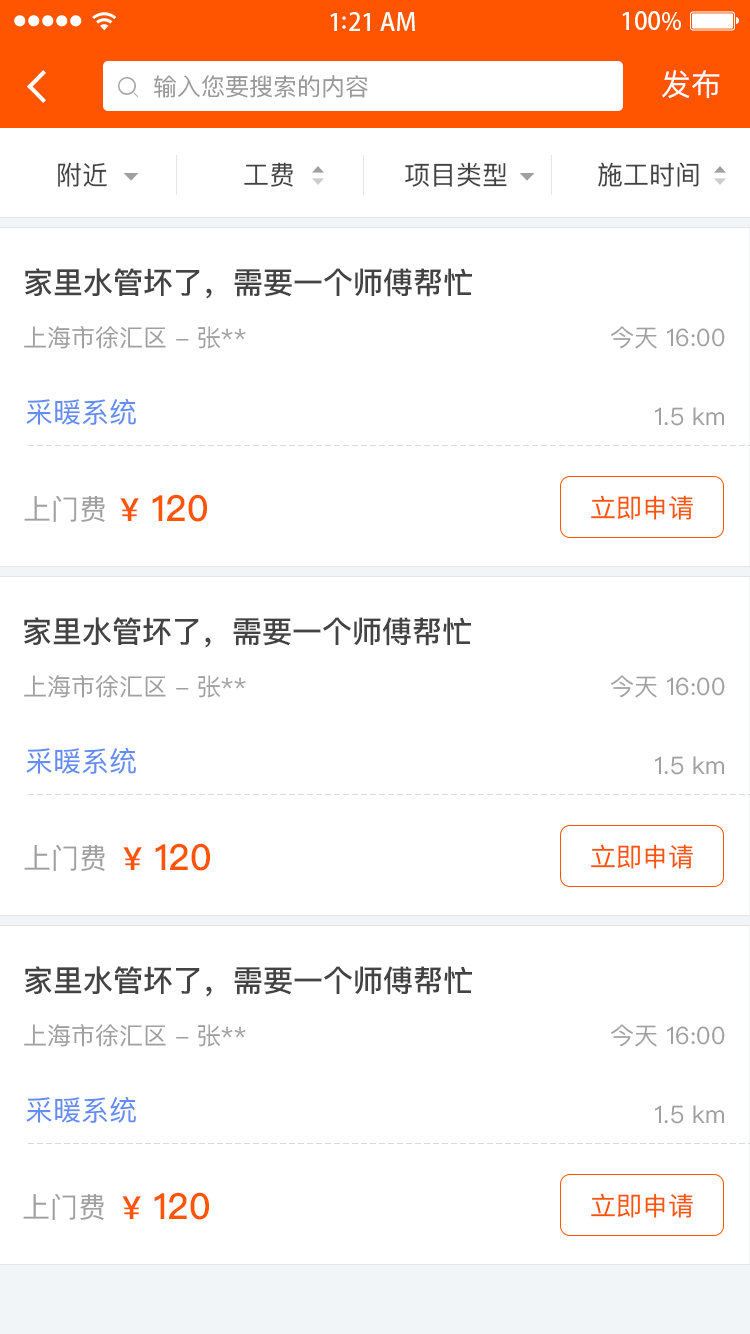
<style>
.page{position:relative;width:750px;height:1334px;background:#ffffff}
.page>*{position:absolute;margin:0}
.t1{font:24px "PingFangSC-Regular";color:#999999}
.t2{font:30px "PingFangSC-Regular";color:#ffffff}
.t3{font:26px "PingFangSC-Regular";color:#434343}
.t4{font:30px "PingFangSC-Medium";color:#434343}
.t5{font:24px "PingFangSC-Regular";color:#a0a0a0}
.t6{font:28px "PingFangSC-Regular";color:#648df4}
.t7{font:28px "PingFangSC-Regular";color:#a0a0a0}
.t8{font:36px "PingFangSC-Medium";color:#ff5400}
.t9{font:32px "PingFangSC-Medium";color:#ff5400}
.t10{font:26px "PingFangSC-Regular";color:#ff5400}
</style>
<div class="page">
<p class="t1" style="left:154px;top:75px;width:214px;height:23px">输入您要搜索的内容</p>
<p class="t2" style="left:662px;top:70px;width:58px;height:29px">发布</p>
<p class="t3" style="left:58px;top:162px;width:49px;height:25px">附近</p>
<p class="t3" style="left:244px;top:162px;width:49px;height:25px">工费</p>
<p class="t3" style="left:405px;top:162px;width:102px;height:25px">项目类型</p>
<p class="t3" style="left:598px;top:162px;width:101px;height:25px">施工时间</p>
<p class="t4" style="left:25px;top:268px;width:447px;height:31px">家里水管坏了，需要一个师傅帮忙</p>
<p class="t5" style="left:24px;top:326px;width:222px;height:23px">上海市徐汇区 - 张**</p>
<p class="t5" style="left:611px;top:326px;width:114px;height:23px">今天 16:00</p>
<p class="t6" style="left:26px;top:398px;width:110px;height:27px">采暖系统</p>
<p class="t5" style="left:655px;top:407px;width:69px;height:19px">1.5 km</p>
<p class="t7" style="left:24px;top:495px;width:81px;height:27px">上门费</p>
<p class="t8" style="left:120px;top:494px;width:87px;height:28px"><span class="t9">¥</span> 120</p>
<p class="t10" style="left:591px;top:495px;width:102px;height:25px">立即申请</p>
<p class="t4" style="left:24px;top:617px;width:447px;height:31px">家里水管坏了，需要一个师傅帮忙</p>
<p class="t5" style="left:24px;top:675px;width:222px;height:23px">上海市徐汇区 - 张**</p>
<p class="t5" style="left:611px;top:675px;width:114px;height:23px">今天 16:00</p>
<p class="t6" style="left:26px;top:747px;width:110px;height:27px">采暖系统</p>
<p class="t5" style="left:655px;top:756px;width:69px;height:19px">1.5 km</p>
<p class="t7" style="left:24px;top:844px;width:81px;height:27px">上门费</p>
<p class="t8" style="left:123px;top:843px;width:87px;height:28px"><span class="t9">¥</span> 120</p>
<p class="t10" style="left:591px;top:844px;width:102px;height:25px">立即申请</p>
<p class="t4" style="left:25px;top:966px;width:447px;height:31px">家里水管坏了，需要一个师傅帮忙</p>
<p class="t5" style="left:24px;top:1024px;width:222px;height:23px">上海市徐汇区 - 张**</p>
<p class="t5" style="left:611px;top:1024px;width:114px;height:23px">今天 16:00</p>
<p class="t6" style="left:26px;top:1096px;width:110px;height:27px">采暖系统</p>
<p class="t5" style="left:655px;top:1105px;width:69px;height:19px">1.5 km</p>
<p class="t7" style="left:23px;top:1193px;width:81px;height:27px">上门费</p>
<p class="t8" style="left:122px;top:1192px;width:87px;height:28px"><span class="t9">¥</span> 120</p>
<p class="t10" style="left:591px;top:1193px;width:102px;height:25px">立即申请</p>
</div>
